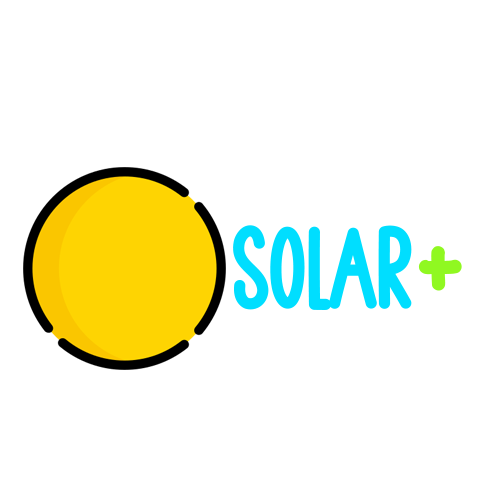
<style>
.page{position:relative;width:500px;height:500px;background:#ffffff}
.page>*{position:absolute;margin:0}
.t1{font:110px "SimpleSummerRegular";color:#00deff}
.t2{font:110px "AutumBright";color:#90f821}
</style>
<div class="page">
<p class="t1" style="left:233px;top:225px;width:179px;height:85px">SOLAR</p>
<p class="t2" style="left:418px;top:246px;width:44px;height:45px">+</p>
</div>
